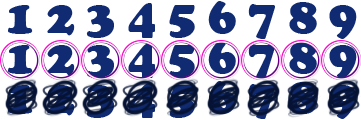
<style>
.page{position:relative;width:361px;height:120px;background:#ffffff}
.page>*{position:absolute;margin:0}
.t1{font:50px "CooperBlack";letter-spacing:0.26em;color:#102b72;scale:0.94 1}
.t2{font:50px "CooperBlack";letter-spacing:0.26em;scale:0.94 1}
</style>
<div class="page">
<p class="t1" style="left:8px;top:1px;width:349px;height:38px">123456789</p>
<p class="t1" style="left:8px;top:41px;width:349px;height:38px">123456789</p>
<p class="t2" style="left:8px;top:81px;width:349px;height:38px">123456789</p>
</div>
